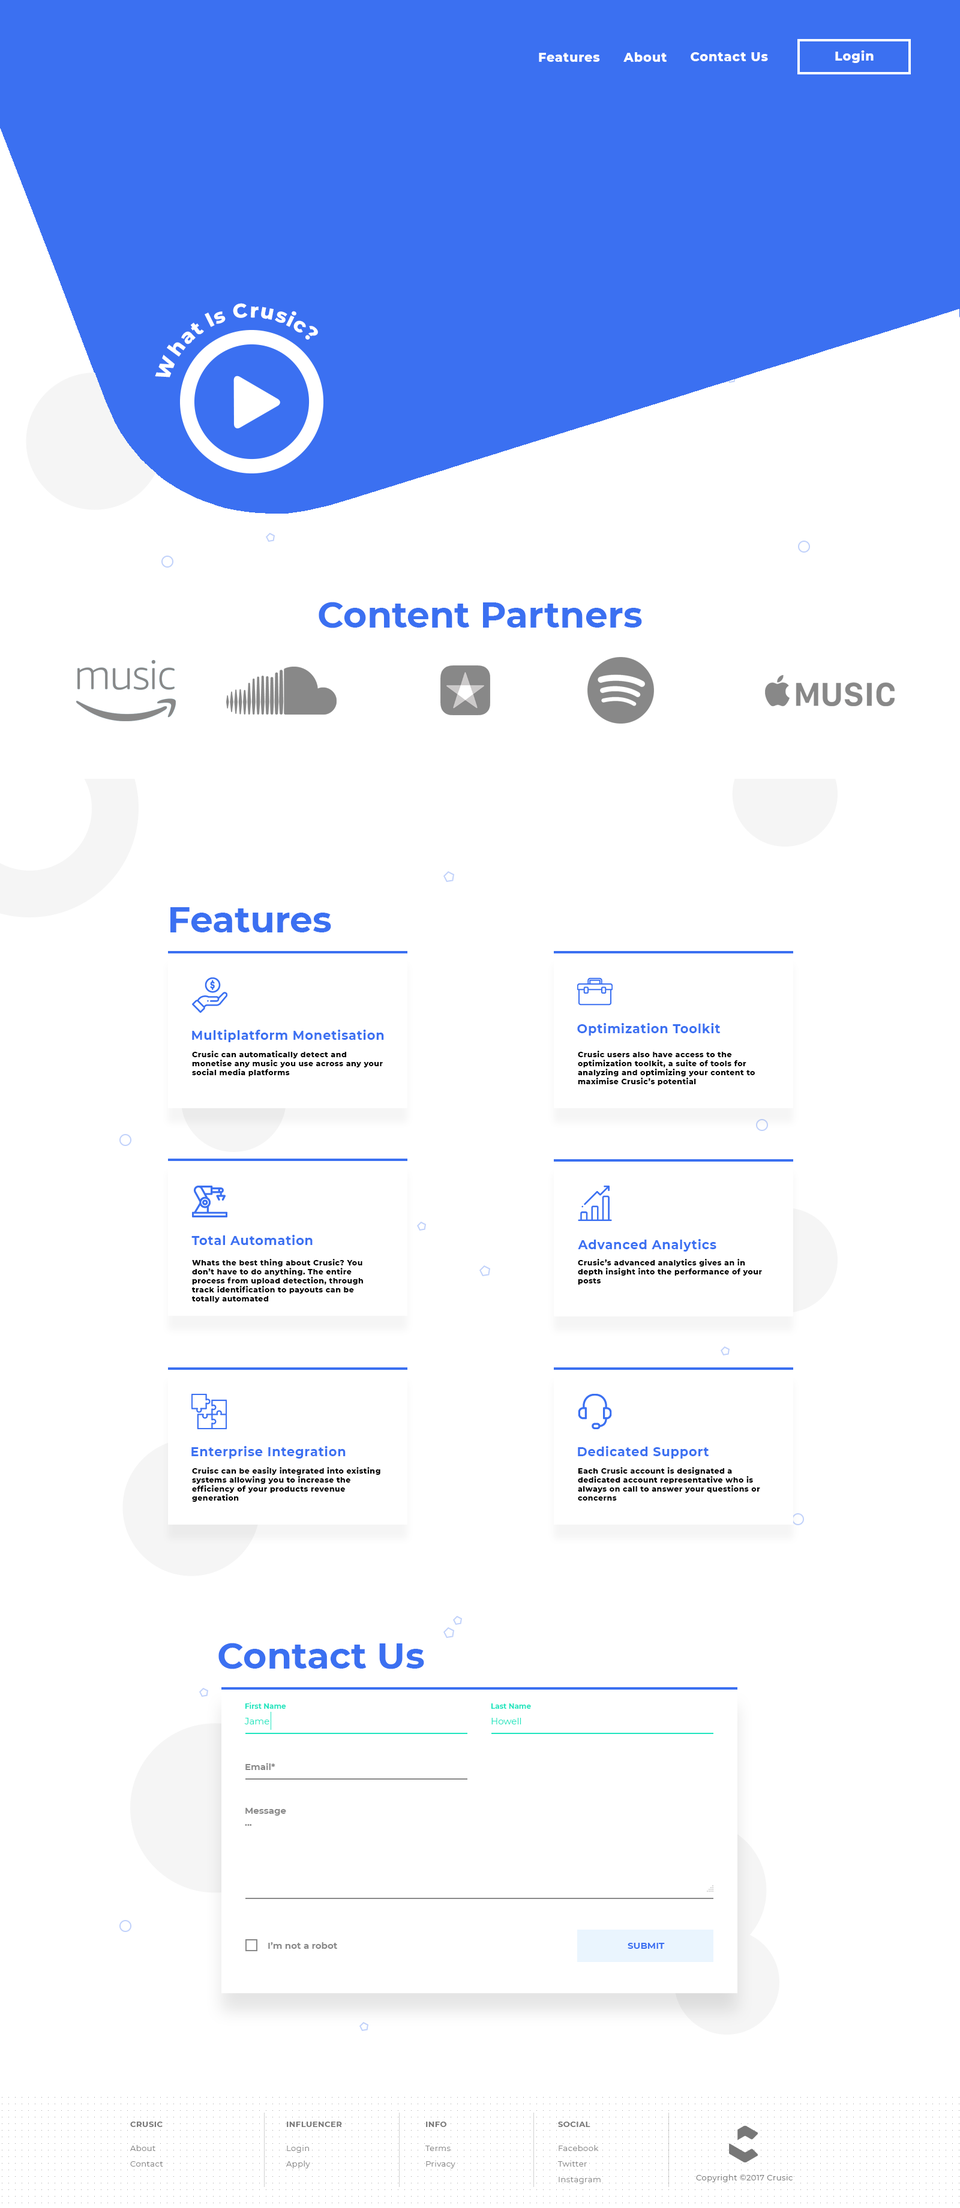
<style>
.page{position:relative;width:960px;height:2208px;background:#ffffff}
.page>*{position:absolute;margin:0}
.t1{font:12.5px "Montserrat-ExtraBold";letter-spacing:0.04em;color:#ffffff}
.t2{font:20px "Montserrat-ExtraBold";letter-spacing:-0.04em;color:#ffffff}
.t3{font:36px "Montserrat-Bold";color:#3b70f1}
.t4{font:12.5px "Montserrat-Bold";letter-spacing:0.04em;color:#3b70f1}
.t5{font:7.5px "Montserrat-ExtraBold";letter-spacing:0.04em;color:#000000}
.t6{font:7.2px "Montserrat-Bold";color:#20e5bf}
.t7{font:9px "Montserrat-Regular";color:#20e5bf}
.t8{font:9px "Montserrat-Bold";color:#898989}
.t9{font:9px "Montserrat-Bold";color:#3b70f1;text-transform:uppercase}
.t10{font:7.8px "Montserrat-Bold";letter-spacing:0.04em;color:#777777;text-transform:uppercase}
.t11{font:7.8px/15.6px "Montserrat-Regular";letter-spacing:0.04em;color:#888888}
.t12{font:7.8px "Montserrat-Regular";letter-spacing:0.04em;color:#777777}
</style>
<div class="page">
<p class="t1" style="left:539px;top:53px;width:61px;height:9px">Features</p>
<p class="t1" style="left:623px;top:52px;width:44px;height:10px">About</p>
<p class="t1" style="left:691px;top:52px;width:77px;height:9px">Contact Us</p>
<p class="t1" style="left:835px;top:50px;width:39px;height:13px">Login</p>
<p class="t2" style="left:155px;top:303px;width:163px;height:74px;rotate:45deg">What Is Crusic?</p>
<p class="t3" style="left:319px;top:602px;width:323px;height:26px">Content Partners</p>
<p class="t3" style="left:170px;top:907px;width:161px;height:25px">Features</p>
<p class="t4" style="left:577px;top:1023px;width:144px;height:13px">Optimization Toolkit</p>
<p class="t4" style="left:192px;top:1030px;width:192px;height:12px">Multiplatform Monetisation</p>
<p class="t5" style="left:192px;top:1051px;width:191px;height:25px">Crusic can automatically detect and monetise any music you use across any your social media platforms</p>
<p class="t5" style="left:578px;top:1051px;width:177px;height:34px">Crusic users also have access to the optimization toolkit, a suite of tools for analyzing and optimizing your content to maximise Crusic’s potential</p>
<p class="t4" style="left:191px;top:1235px;width:122px;height:10px">Total Automation</p>
<p class="t4" style="left:578px;top:1239px;width:138px;height:13px">Advanced Analytics</p>
<p class="t5" style="left:192px;top:1259px;width:171px;height:44px">Whats the best thing about Crusic? You don’t have to do anything. The entire process from upload detection, through track identification to payouts can be totally automated</p>
<p class="t5" style="left:578px;top:1259px;width:184px;height:26px">Crusic’s advanced analytics gives an in depth insight into the performance of your posts</p>
<p class="t4" style="left:191px;top:1446px;width:155px;height:13px">Enterprise Integration</p>
<p class="t4" style="left:578px;top:1446px;width:131px;height:13px">Dedicated Support</p>
<p class="t5" style="left:192px;top:1467px;width:188px;height:35px">Cruisc can be easily integrated into existing systems allowing you to increase the efficiency of your products revenue generation</p>
<p class="t5" style="left:578px;top:1467px;width:182px;height:34px">Each Crusic account is designated a dedicated account representative who is always on call to answer your questions or concerns</p>
<p class="t3" style="left:218px;top:1643px;width:206px;height:26px">Contact Us</p>
<p class="t6" style="left:245px;top:1702px;width:41px;height:7px">First Name</p>
<p class="t6" style="left:491px;top:1703px;width:40px;height:6px">Last Name</p>
<p class="t7" style="left:244px;top:1718px;width:25px;height:6px">Jame</p>
<p class="t7" style="left:491px;top:1718px;width:30px;height:6px">Howell</p>
<p class="t8" style="left:245px;top:1763px;width:30px;height:7px">Email*</p>
<p class="t8" style="left:245px;top:1808px;width:41px;height:8px">Message</p>
<p class="t8" style="left:245px;top:1824px;width:7px;height:2px">...</p>
<p class="t8" style="left:268px;top:1942px;width:69px;height:7px">I’m not a robot</p>
<p class="t9" style="left:628px;top:1943px;width:37px;height:6px">Submit</p>
<p class="t10" style="left:130px;top:2122px;width:33px;height:5px">Crusic</p>
<p class="t10" style="left:287px;top:2122px;width:55px;height:5px">influencer</p>
<p class="t10" style="left:426px;top:2122px;width:21px;height:5px">info</p>
<p class="t10" style="left:558px;top:2122px;width:32px;height:5px">Social</p>
<p class="t11" style="left:130px;top:2145px;width:33px;height:22px">About<br>Contact</p>
<p class="t11" style="left:286px;top:2145px;width:24px;height:23px">Login<br>Apply</p>
<p class="t11" style="left:425px;top:2146px;width:30px;height:22px">Terms<br>Privacy</p>
<p class="t11" style="left:557px;top:2145px;width:44px;height:39px">Facebook<br>Twitter<br>Instagram</p>
<p class="t12" style="left:696px;top:2174px;width:97px;height:8px">Copyright ©2017 Crusic</p>
</div>
